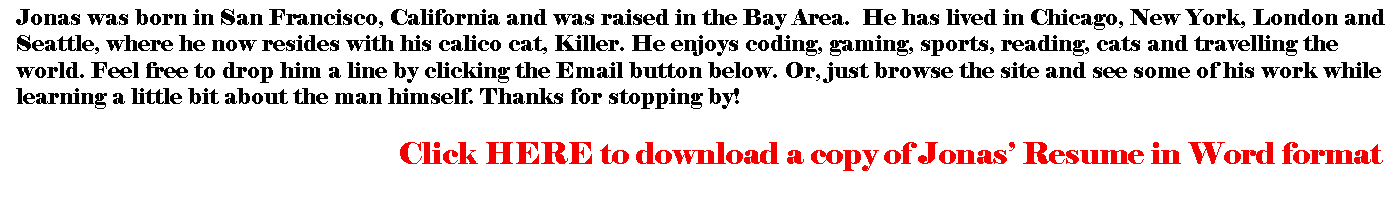
<style>
.page{position:relative;width:1400px;height:200px;background:#ffffff}
.page>*{position:absolute;margin:0}
.t1{font:22px "Elephant-Regular";color:#000000}
.t2{font:30px "Elephant-Regular";color:#f50000}
</style>
<div class="page">
<p class="t1" style="left:16px;top:9px;width:1369px;height:100px">Jonas was born in San Francisco, California and was raised in the Bay Area.  He has lived in Chicago, New York, London and <br>Seattle, where he now resides with his calico cat, Killer. He enjoys coding, gaming, sports, reading, cats and travelling the<br>world. Feel free to drop him a line by clicking the Email button below. Or, just browse the site and see some of his work while<br>learning a little bit about the man himself. Thanks for stopping by!</p>
<p class="t2" style="left:400px;top:142px;width:983px;height:29px">Click HERE to download a copy of Jonas’ Resume in Word format</p>
</div>
